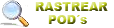
<style>
.page{position:relative;width:114px;height:28px;background:#ffffff}
.page>*{position:absolute;margin:0}
.t1{font:12px "Arial-Black"}
</style>
<div class="page">
<p class="t1" style="left:35px;top:2px;width:73px;height:9px">RASTREAR</p>
<p class="t1" style="left:48px;top:15px;width:39px;height:9px">POD´s</p>
</div>
